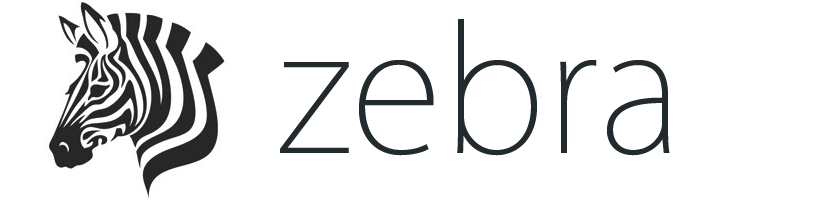
<style>
.page{position:relative;width:830px;height:200px;background:#ffffff}
.page>*{position:absolute;margin:0}
.t1{font:169.1px "KozGoPr6N-ExtraLight";color:#232a2d}
</style>
<div class="page">
<p class="t1" style="left:280px;top:19px;width:390px;height:137px">zebra</p>
</div>
